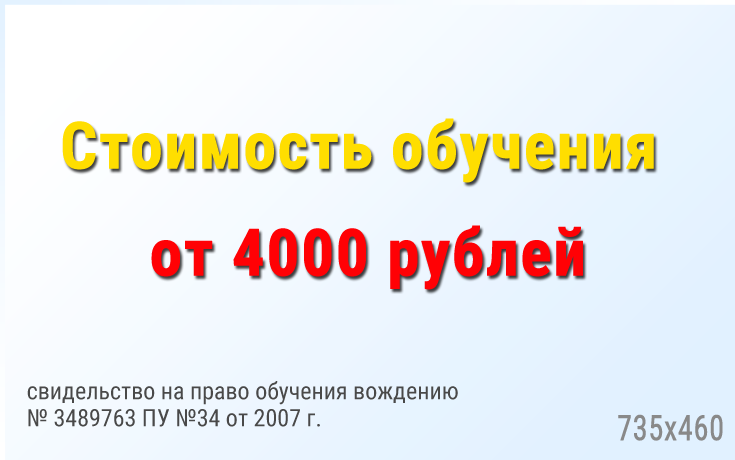
<style>
.page{position:relative;width:735px;height:460px}
.page>*{position:absolute;margin:0}
.t1{font:65px "RobotoCondensed-Bold";color:#ffde00;font-weight:bold}
.t2{font:65px "RobotoCondensed-Bold";color:#ff0105;font-weight:bold}
.t3{font:24px/27px "RobotoCondensed-Regular";color:#494949}
.t4{font:35px "RobotoCondensed-Regular";color:#898989;font-weight:bold;scale:0.86 1}
</style>
<div class="page">
<p class="t1" style="left:62px;top:118px;width:592px;height:65px">Стоимость обучения</p>
<p class="t2" style="left:151px;top:225px;width:432px;height:65px">от 4000 рублей</p>
<p class="t3" style="left:27px;top:381px;width:431px;height:46px">свидельство на право обучения вождению <br>№ 3489763 ПУ №34 от 2007 г.</p>
<p class="t4" style="left:618px;top:414px;width:105px;height:27px">735x460</p>
</div>
